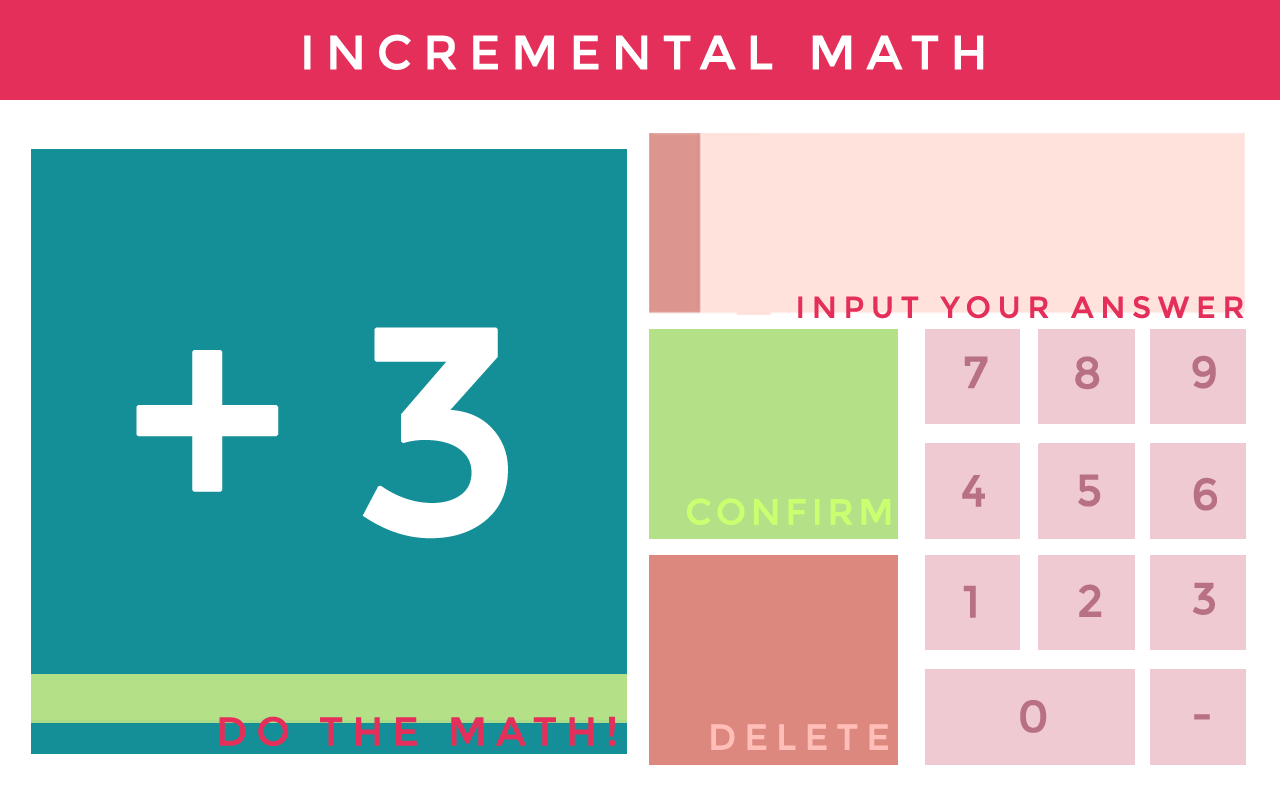
<style>
.page{position:relative;width:1280px;height:800px;background:#148f97}
.page>*{position:absolute;margin:0}
.t1{font:48px "Montserrat-Regular";letter-spacing:0.2em;color:#ffffff;text-transform:uppercase;font-weight:bold}
.t2{font:30px "Montserrat-Regular";letter-spacing:0.2em;color:#e42f5a;text-transform:uppercase;font-weight:bold}
.t3{font:292.4px "Montserrat-Regular";letter-spacing:0.2em;color:#ffffff;text-transform:uppercase;font-weight:bold}
.t4{font:44.5px "Montserrat-Regular";letter-spacing:0.2em;color:#b77182;text-transform:uppercase;font-weight:bold}
.t5{font:36px "Montserrat-Regular";letter-spacing:0.1em;color:#ccff6f;text-transform:uppercase;font-weight:bold}
.t6{font:40px "Montserrat-Regular";letter-spacing:0.2em;color:#e42f5a;text-transform:uppercase;font-weight:bold}
.t7{font:36px "Montserrat-Regular";letter-spacing:0.2em;color:#ffbfb8;text-transform:uppercase;font-weight:bold}
</style>
<div class="page">
<p class="t1" style="left:304px;top:34px;width:680px;height:36px">Incremental Math</p>
<p class="t2" style="left:798px;top:296px;width:446px;height:23px">Input your Answer</p>
<p class="t3" style="left:136px;top:327px;width:372px;height:212px">+3</p>
<p class="t4" style="left:964px;top:356px;width:24px;height:33px">7</p>
<p class="t4" style="left:1075px;top:356px;width:25px;height:34px">8</p>
<p class="t4" style="left:1192px;top:355px;width:24px;height:34px">9</p>
<p class="t4" style="left:962px;top:475px;width:23px;height:32px">4</p>
<p class="t4" style="left:1078px;top:474px;width:23px;height:33px">5</p>
<p class="t4" style="left:1193px;top:477px;width:24px;height:34px">6</p>
<p class="t5" style="left:687px;top:498px;width:204px;height:27px">Confirm</p>
<p class="t4" style="left:1192px;top:582px;width:23px;height:33px">3</p>
<p class="t4" style="left:963px;top:585px;width:13px;height:33px">1</p>
<p class="t4" style="left:1079px;top:584px;width:23px;height:33px">2</p>
<p class="t4" style="left:1020px;top:700px;width:27px;height:33px">0</p>
<p class="t6" style="left:219px;top:716px;width:397px;height:31px">Do the Math!</p>
<p class="t7" style="left:711px;top:724px;width:177px;height:26px">Delete</p>
<p class="t4" style="left:1194px;top:714px;width:16px;height:6px">-</p>
</div>
